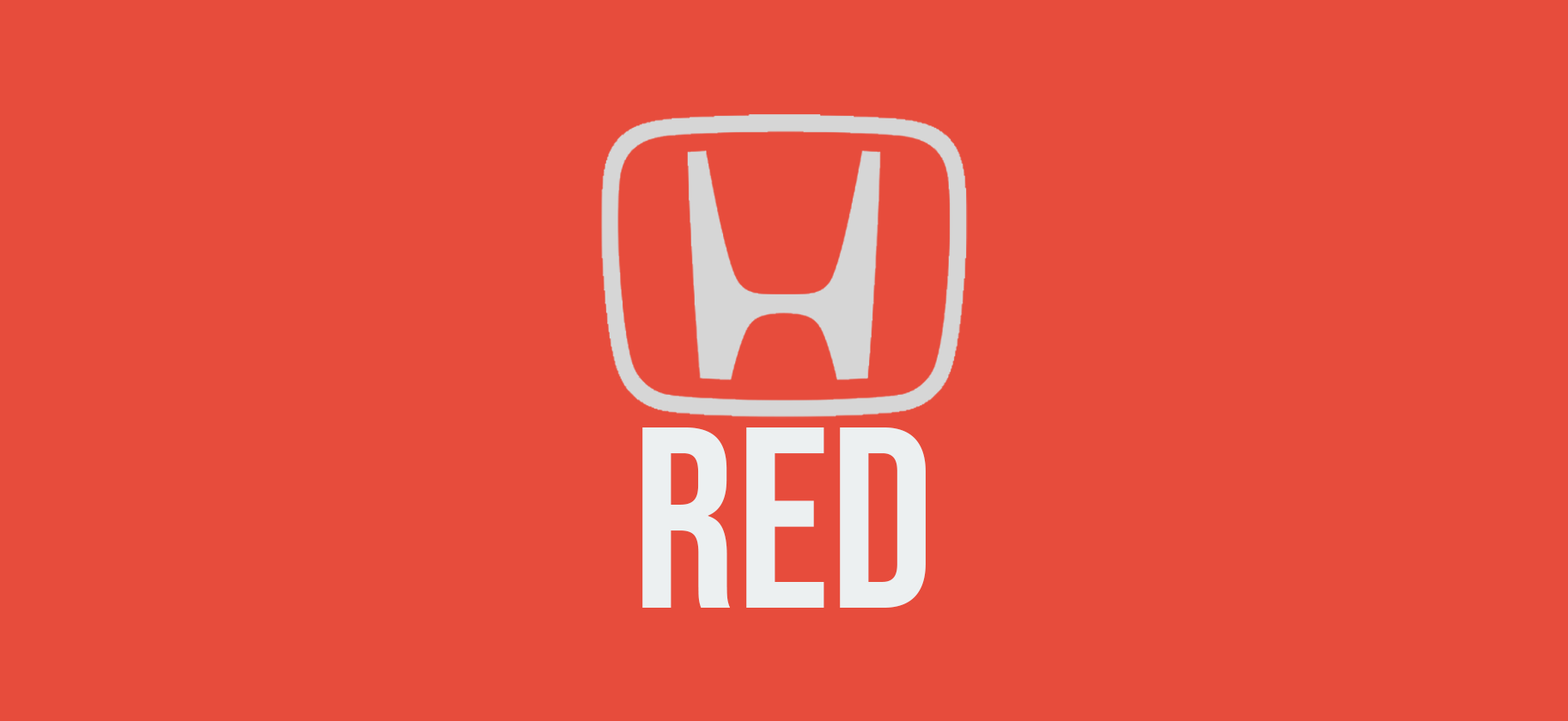
<style>
.page{position:relative;width:1568px;height:721px;background:#e74c3c}
.page>*{position:absolute;margin:0}
.t1{font:257.6px "BebasNeue-Regular";color:#ecf0f1}
</style>
<div class="page">
<p class="t1" style="left:642px;top:428px;width:284px;height:180px">RED</p>
</div>
